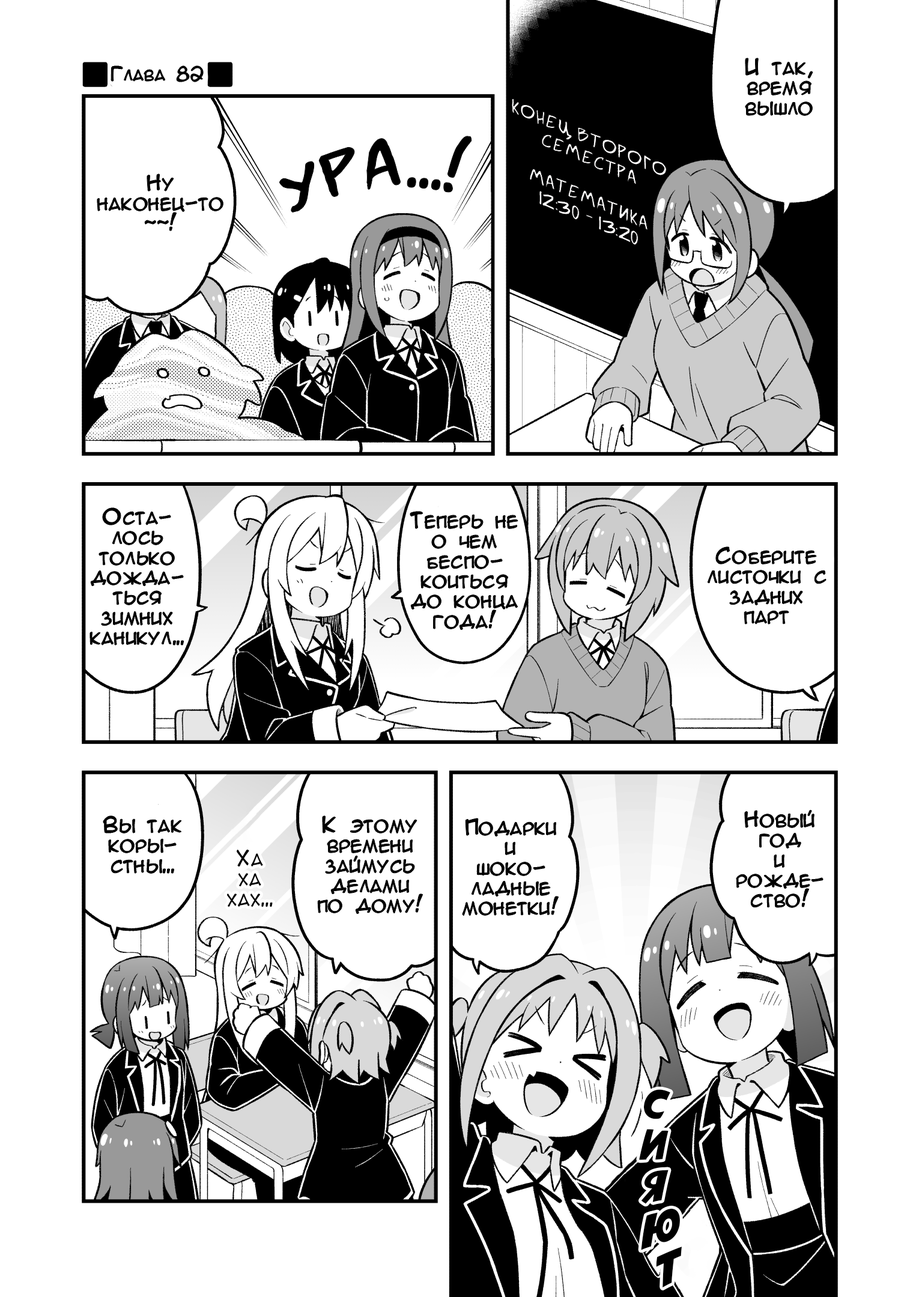
<style>
.page{position:relative;width:919px;height:1297px;background:#ffffff}
.page>*{position:absolute;margin:0}
.t1{font:20px/20px "AnimeAcev3";color:#000000}
.t2{font:17.5px "AnimeAcev3";color:#000000}
.t3{font:20px/20px "SuperWebcomicBros.Rusbyyakustick";color:#fffefe;scale:1.09 1}
.t4{font:70.1px "SuperWebcomicBros.Rusbyyakustick";color:#000000}
.t5{font:40px/40px "AvengeanceMArusbyaLiNcE";color:#000000}
.t6{font:50.1px/50.1px "AnimeAcev3";color:#000000}
</style>
<div class="page">
<p class="t1" style="left:745px;top:58px;width:68px;height:58px;text-align:center">И так,<br>время<br>вышло</p>
<p class="t2" style="left:111px;top:66px;width:92px;height:16px">Глава 82</p>
<p class="t3" style="left:512px;top:99px;width:155px;height:146px;text-align:center;rotate:23deg">Конец второго<br>семестра<br><br>Математика<br>12:30 - 13:20</p>
<p class="t4" style="left:279px;top:136px;width:193px;height:77px;rotate:-9deg">УРА...!</p>
<p class="t1" style="left:97px;top:174px;width:126px;height:57px;text-align:center">Ну<br>наконец-то<br>~~!</p>
<p class="t1" style="left:90px;top:508px;width:94px;height:137px;text-align:center">Оста-<br>лось<br>только<br>дожда-<br>ться<br>зимних<br>каникул...</p>
<p class="t1" style="left:410px;top:512px;width:108px;height:118px;text-align:center">Теперь не<br>о чем<br>беспо-<br>коиться<br>до конца<br>года!</p>
<p class="t1" style="left:708px;top:547px;width:118px;height:77px;text-align:center">Соберите<br>листочки с<br>задних<br>парт</p>
<p class="t1" style="left:103px;top:816px;width:78px;height:58px;text-align:center">Вы так<br>коры-<br>стны...</p>
<p class="t1" style="left:318px;top:816px;width:105px;height:98px;text-align:center">К этому<br>времени<br>займусь<br>делами<br>по дому!</p>
<p class="t1" style="left:463px;top:819px;width:96px;height:97px;text-align:center">Подарки<br>и<br>шоко-<br>ладные<br>монетки!</p>
<p class="t1" style="left:736px;top:810px;width:87px;height:98px;text-align:center">Новый<br>год<br>и<br>рожде-<br>ство!</p>
<p class="t1" style="left:227px;top:850px;width:46px;height:57px;text-align:center">Ха<br>ха<br>хах...</p>
<p class="t5" style="left:639px;top:1090px;width:43px;height:198px;text-align:center;rotate:-2deg"><span class="t6"><br></span>C<br>И<br>Я<br>Ю<br>Т</p>
</div>
